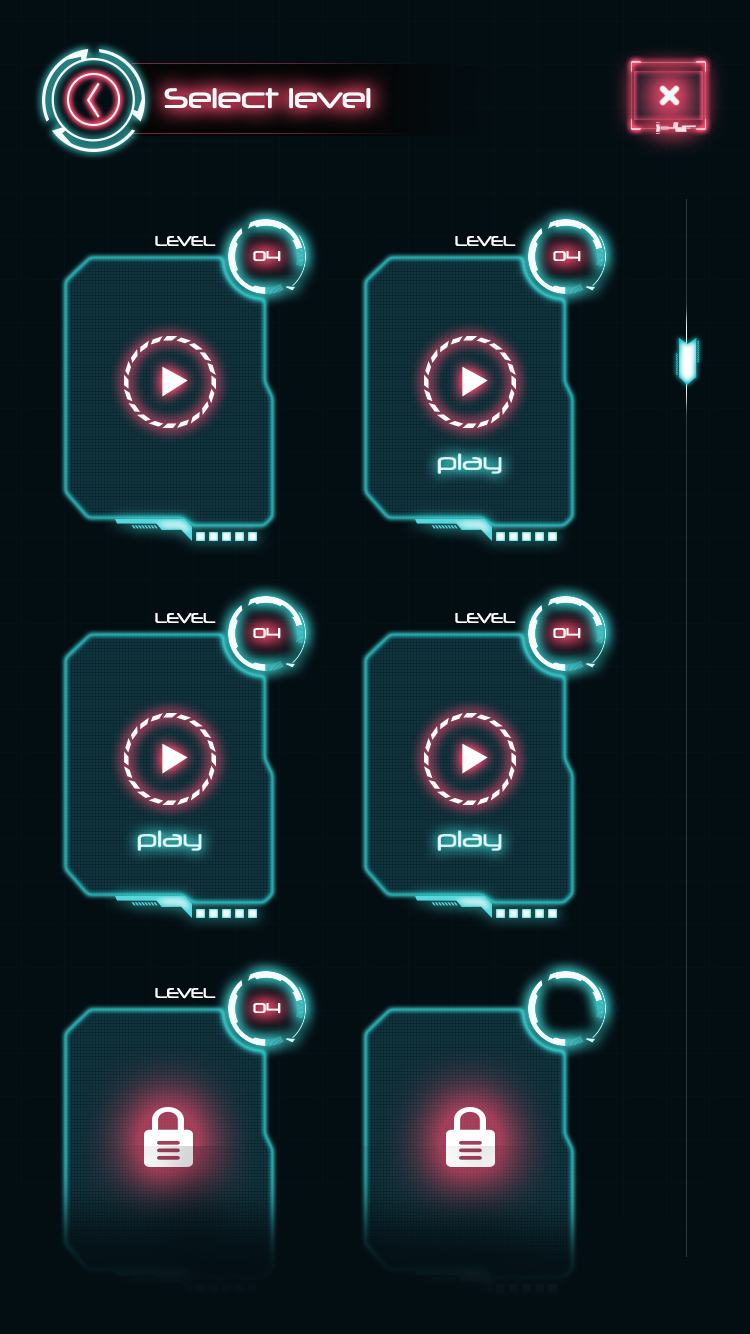
<style>
.page{position:relative;width:750px;height:1334px;background:#030e13}
.page>*{position:absolute;margin:0}
.t1{font:27.2px "Neuropol-Regular";color:#f4fafc}
.t2{font:13.6px "Neuropol-Regular";color:#ffffff}
.t3{font:22.6px "Neuropol-Regular"}
</style>
<div class="page">
<p class="t1" style="left:164px;top:88px;width:207px;height:21px">Select level</p>
<p class="t2" style="left:155px;top:236px;width:61px;height:11px">LEVEL</p>
<p class="t2" style="left:455px;top:236px;width:61px;height:11px">LEVEL</p>
<p class="t2" style="left:253px;top:251px;width:28px;height:11px">04</p>
<p class="t2" style="left:553px;top:251px;width:28px;height:11px">04</p>
<p class="t3" style="left:437px;top:453px;width:65px;height:21px">play</p>
<p class="t2" style="left:155px;top:613px;width:61px;height:11px">LEVEL</p>
<p class="t2" style="left:455px;top:613px;width:61px;height:11px">LEVEL</p>
<p class="t2" style="left:253px;top:628px;width:28px;height:11px">04</p>
<p class="t2" style="left:553px;top:628px;width:28px;height:11px">04</p>
<p class="t3" style="left:137px;top:830px;width:65px;height:21px">play</p>
<p class="t3" style="left:437px;top:830px;width:65px;height:21px">play</p>
<p class="t2" style="left:155px;top:988px;width:61px;height:11px">LEVEL</p>
<p class="t2" style="left:253px;top:1003px;width:28px;height:11px">04</p>
</div>
